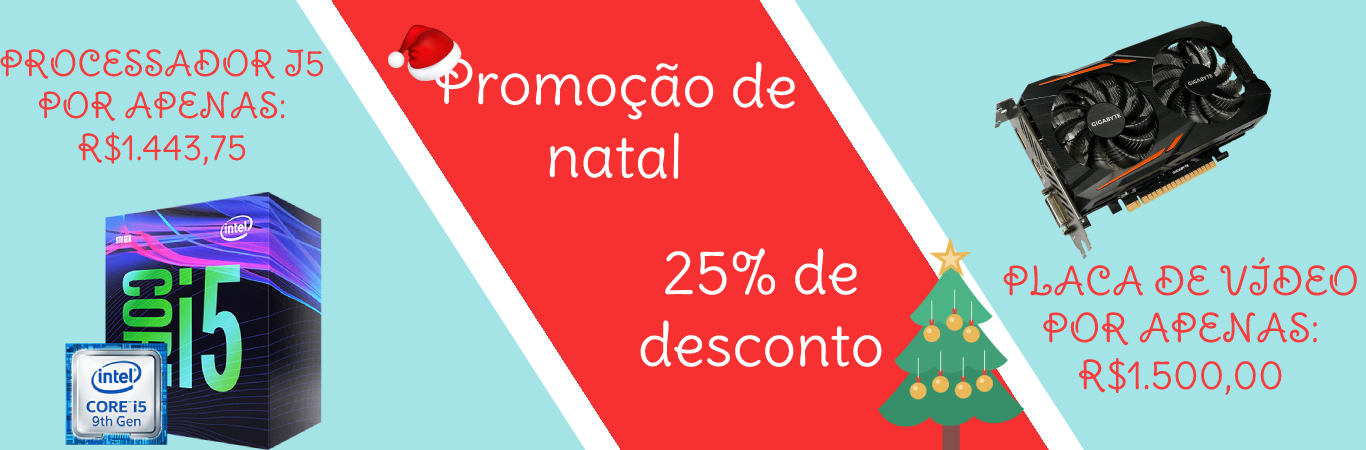
<style>
.page{position:relative;width:1366px;height:450px;background:#a4e3e6}
.page>*{position:absolute;margin:0}
.t1{font:35px "DeliusSwashCaps-Regular";color:#f63e3e}
.t2{font:60px "DeliusSwashCaps-Regular";color:#ffffff}
.t3{font:39px "DeliusSwashCaps-Regular";color:#f63e3e}
</style>
<div class="page">
<p class="t1" style="left:0px;top:49px;width:324px;height:117px;text-align:center">PROCESSADOR I5<br>POR APENAS:<br>R$1.443,75</p>
<p class="t2" style="left:435px;top:57px;width:360px;height:122px;text-align:center;rotate:1deg">Promoção de <br>natal</p>
<p class="t2" style="left:640px;top:248px;width:242px;height:119px;text-align:center">25% de <br>desconto</p>
<p class="t3" style="left:1003px;top:257px;width:354px;height:138px;text-align:center">PLACA DE VÍDEO<br>POR APENAS:<br>R$1.500,00</p>
</div>
